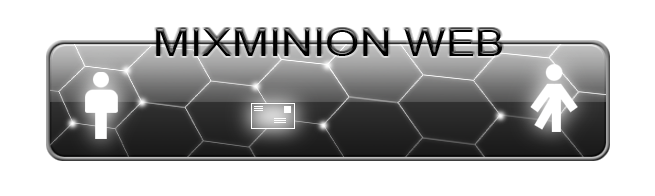
<style>
.page{position:relative;width:655px;height:196px;background:#ffffff}
.page>*{position:absolute;margin:0}
.t1{font:38.4px "ArialMT";color:#000000;scale:1.15 1}
</style>
<div class="page">
<p class="t1" style="left:156px;top:29px;width:346px;height:27px">MIXMINION WEB</p>
</div>
